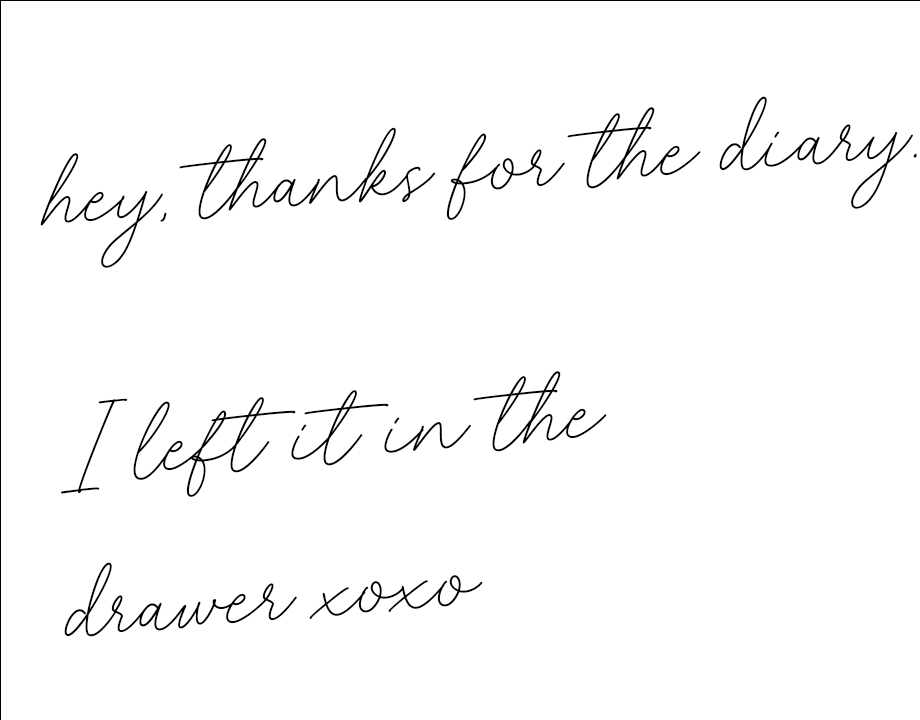
<style>
.page{position:relative;width:920px;height:720px;background:#ffffff}
.page>*{position:absolute;margin:0}
.t1{font:131px "CharlieScript";color:#000000}
</style>
<div class="page">
<p class="t1" style="left:40px;top:96px;width:877px;height:172px;rotate:-5deg">hey, thanks for the diary.</p>
<p class="t1" style="left:61px;top:371px;width:546px;height:266px;rotate:-5deg">I left it in the <br>drawer xoxo</p>
</div>
